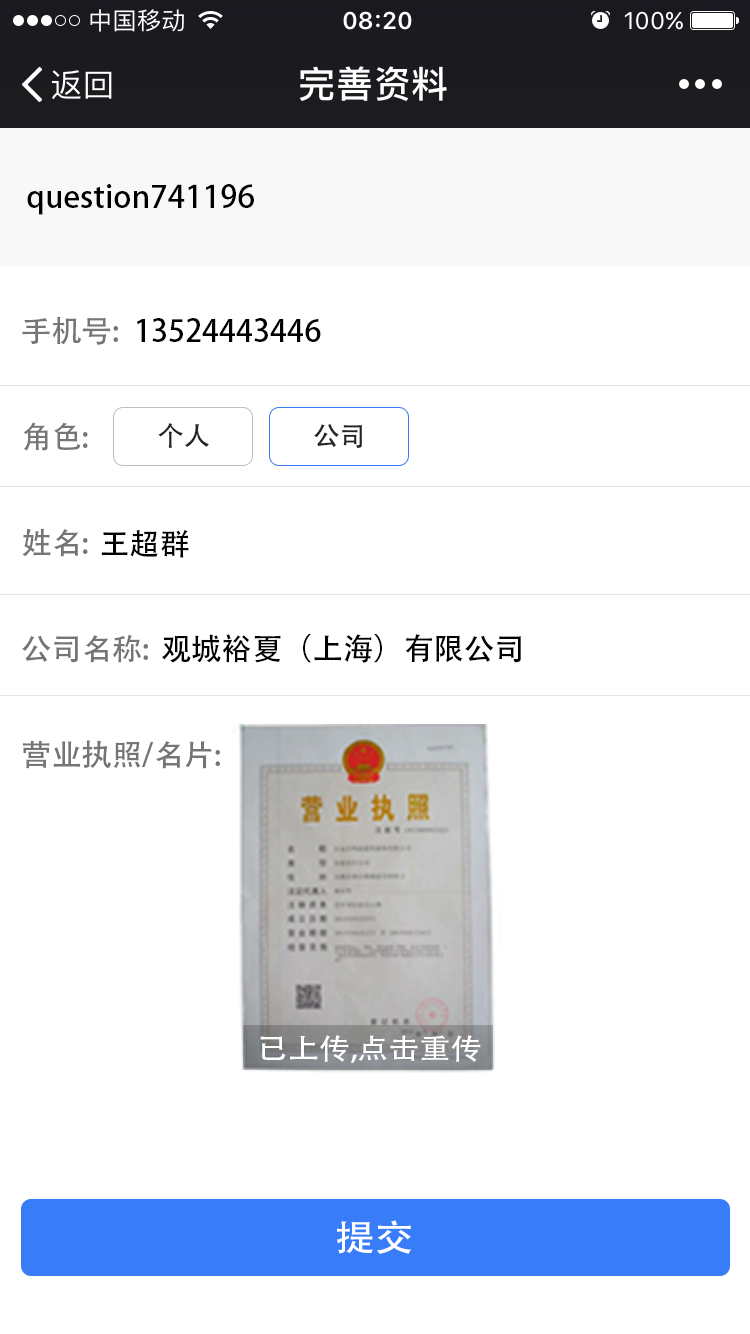
<style>
.page{position:relative;width:750px;height:1334px;background:#ffffff}
.page>*{position:absolute;margin:0}
.t1{font:31px "AdobeHeitiStd-Regular";color:#000000}
.t2{font:30.3px/106px "AdobeHeitiStd-Regular";color:#757575}
.t3{font:30.3px "AdobeHeitiStd-Regular";color:#010101}
.t4{font:26.7px "AdobeHeitiStd-Regular";color:#232326}
.t5{font:28.4px "AdobeHeitiStd-Regular";color:#ffffff;scale:1.09 1}
.t6{font:36.1px "AdobeHeitiStd-Regular";color:#ffffff;scale:1.09 1}
</style>
<div class="page">
<p class="t1" style="left:27px;top:184px;width:227px;height:31px">question741196</p>
<p class="t2" style="left:22px;top:317px;width:198px;height:452px">手机号: <br>角色:<br>姓名:<br>公司名称:<br>营业执照/名片:</p>
<p class="t3" style="left:136px;top:318px;width:185px;height:24px">13524443446</p>
<p class="t4" style="left:158px;top:423px;width:51px;height:25px">个人</p>
<p class="t4" style="left:314px;top:424px;width:49px;height:24px">公司</p>
<p class="t3" style="left:101px;top:529px;width:88px;height:29px">王超群</p>
<p class="t3" style="left:162px;top:634px;width:359px;height:29px">观城裕夏（上海）有限公司</p>
<p class="t5" style="left:260px;top:1035px;width:221px;height:28px">已上传,点击重传</p>
<p class="t6" style="left:337px;top:1220px;width:74px;height:34px">提交</p>
</div>
